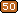
<style>
.page{position:relative;width:18px;height:13px;background:#bf6822}
.page>*{position:absolute;margin:0}
.t1{font:10px "Verdana";color:#ffffff}
</style>
<div class="page">
<p class="t1" style="left:3px;top:3px;width:12px;height:7px">50</p>
</div>
